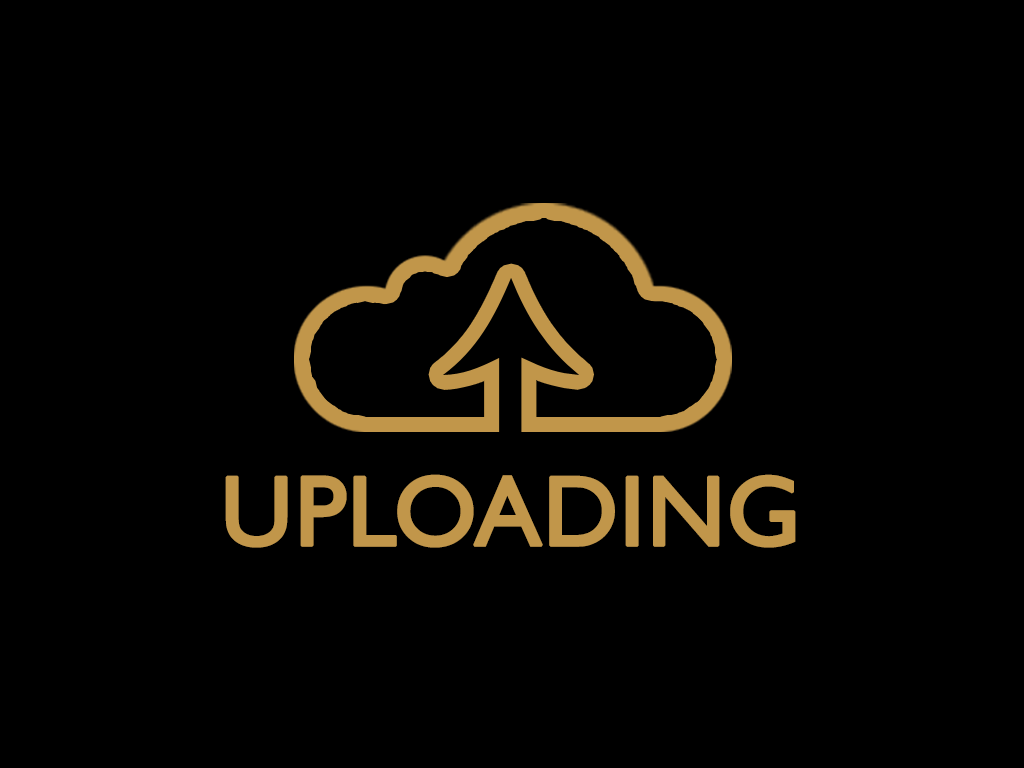
<style>
.page{position:relative;width:1024px;height:768px;background:#000000}
.page>*{position:absolute;margin:0}
.t1{font:100px "GillSans";color:#c1964a;font-weight:bold}
</style>
<div class="page">
<p class="t1" style="left:225px;top:474px;width:571px;height:74px">UPLOADING</p>
</div>
